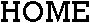
<style>
.page{position:relative;width:90px;height:23px;background:#ffffff}
.page>*{position:absolute;margin:0}
.t1{font:30px "Rockwell";color:#000000}
</style>
<div class="page">
<p class="t1" style="left:1px;top:1px;width:88px;height:21px">HOME</p>
</div>
